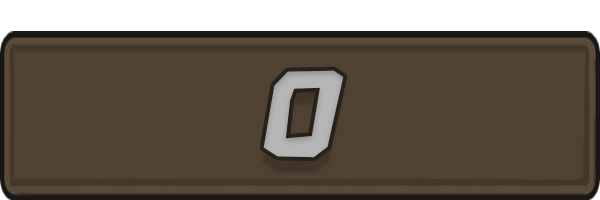
<style>
.page{position:relative;width:600px;height:200px;background:#4f4233}
.page>*{position:absolute;margin:0}
.t1{font:125px "Boulder";letter-spacing:-0.025em;color:#b6b6b6;font-weight:bold;font-style:italic}
</style>
<div class="page">
<p class="t1" style="left:263px;top:70px;width:81px;height:88px">0</p>
</div>
